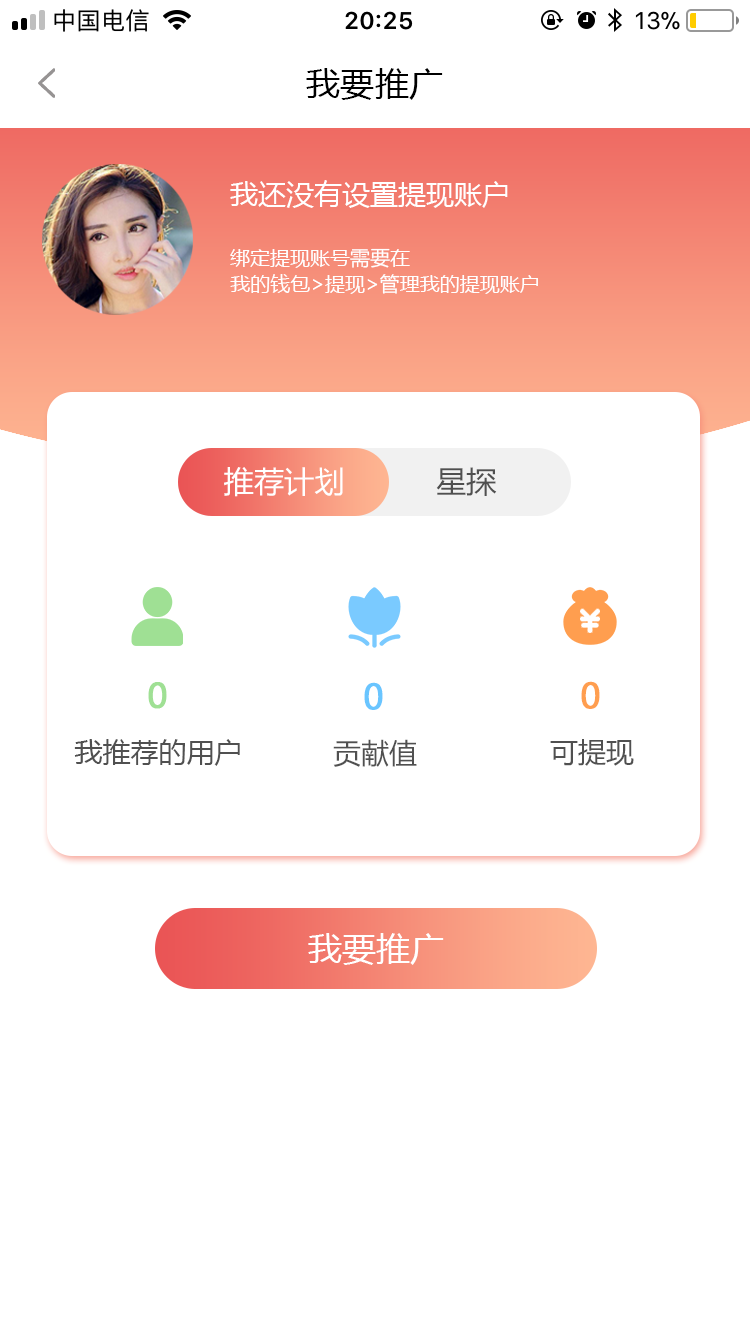
<style>
.page{position:relative;width:750px;height:1334px;background:#ffffff}
.page>*{position:absolute;margin:0}
.t1{font:34px "MicrosoftYaHei";letter-spacing:0.01em;color:#000000}
.t2{font:28px "MicrosoftYaHei";color:#ffffff}
.t3{font:20px "MicrosoftYaHei";color:#ffffff}
.t4{font:29.7px "MicrosoftYaHei";color:#ffffff}
.t5{font:30px "MicrosoftYaHei";color:#505050}
.t6{font:34px "MicrosoftYaHei";color:#9fe094;font-weight:bold}
.t7{font:34.1px "MicrosoftYaHei";color:#69c5ff;font-weight:bold}
.t8{font:34.1px "MicrosoftYaHei";color:#ff9e4f;font-weight:bold}
.t9{font:28px "MicrosoftYaHei";color:#505050}
.t10{font:28.1px "MicrosoftYaHei";color:#505050}
.t11{font:34px "MicrosoftYaHei";color:#ffffff}
</style>
<div class="page">
<p class="t1" style="left:306px;top:68px;width:137px;height:32px">我要推广</p>
<p class="t2" style="left:230px;top:180px;width:278px;height:28px">我还没有设置提现账户</p>
<p class="t3" style="left:230px;top:248px;width:180px;height:20px">绑定提现账号需要在</p>
<p class="t3" style="left:230px;top:274px;width:308px;height:20px">我的钱包&gt;提现&gt;管理我的提现账户</p>
<p class="t4" style="left:224px;top:467px;width:119px;height:30px">推荐计划</p>
<p class="t5" style="left:436px;top:467px;width:61px;height:29px">星探</p>
<p class="t6" style="left:148px;top:682px;width:19px;height:27px">0</p>
<p class="t7" style="left:364px;top:682px;width:19px;height:28px">0</p>
<p class="t8" style="left:581px;top:681px;width:19px;height:28px">0</p>
<p class="t9" style="left:74px;top:739px;width:166px;height:27px">我推荐的用户</p>
<p class="t10" style="left:333px;top:739px;width:84px;height:28px">贡献值</p>
<p class="t10" style="left:550px;top:739px;width:84px;height:27px">可提现</p>
<p class="t11" style="left:308px;top:933px;width:136px;height:32px">我要推广</p>
</div>
